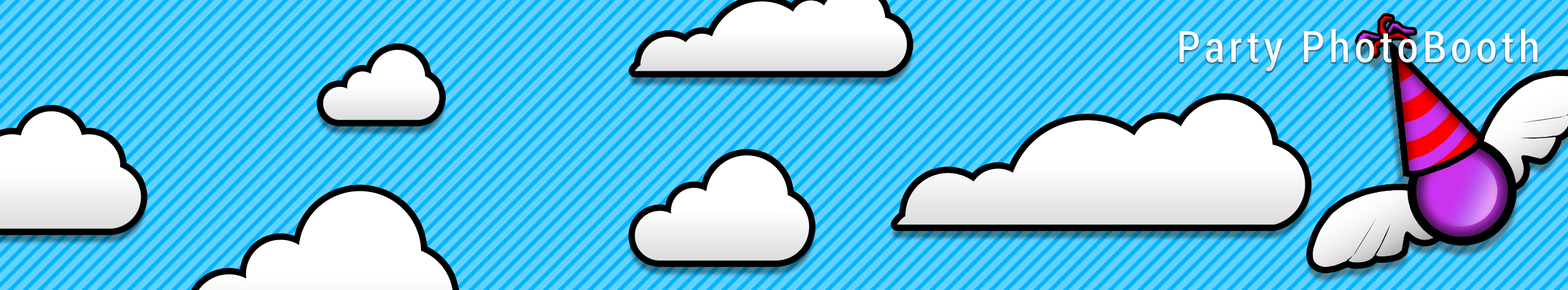
<style>
.page{position:relative;width:1568px;height:290px}
.page>*{position:absolute;margin:0}
.t1{font:43px "Roboto-Condensed";letter-spacing:0.1em;color:#ffffff}
</style>
<div class="page">
<p class="t1" style="left:1179px;top:29px;width:359px;height:42px">Party PhotoBooth</p>
</div>
